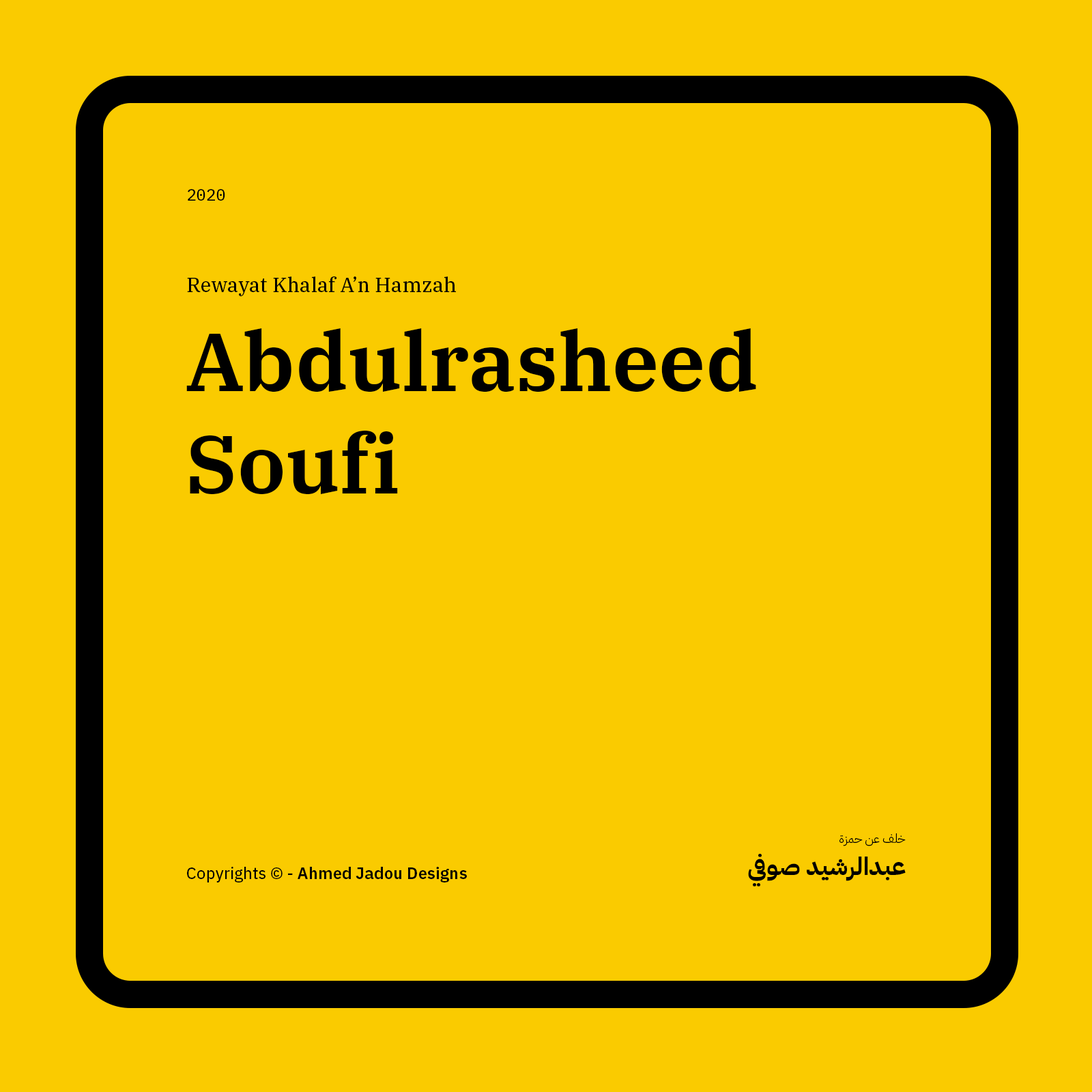
<style>
.page{position:relative;width:1092px;height:1092px;background:#facb00}
.page>*{position:absolute;margin:0}
.t1{font:16.4px "IBMPlexMono-Text";color:#000000}
.t2{font:20.5px "IBMPlexSerif-Text";color:#000000}
.t3{font:81.9px/102.7px "IBMPlexSerif-SemiBold";color:#000000}
.t4{font:12.3px "IBMPlexArabic-Light";color:#000000}
.t5{font:24.6px "IBMPlexArabic-Bold";color:#000000}
.t6{font:16.4px "IBMPlexSans-SemiBold";color:#000000}
.t7{font:16.4px "IBMPlexSans-Text";color:#000000}
</style>
<div class="page">
<p class="t1" style="left:188px;top:189px;width:37px;height:12px">2020</p>
<p class="t2" style="left:187px;top:276px;width:269px;height:20px">Rewayat Khalaf A’n Hamzah</p>
<p class="t3" style="left:186px;top:328px;width:570px;height:166px">Abdulrasheed Soufi</p>
<p class="t4" style="left:839px;top:833px;width:67px;height:13px">خلف عن حمزة</p>
<p class="t5" style="left:748px;top:854px;width:158px;height:33px">عبدالرشيد صوفي</p>
<p class="t6" style="left:187px;top:867px;width:280px;height:15px"><span class="t7">Copyrights © - </span>Ahmed Jadou Designs</p>
</div>
